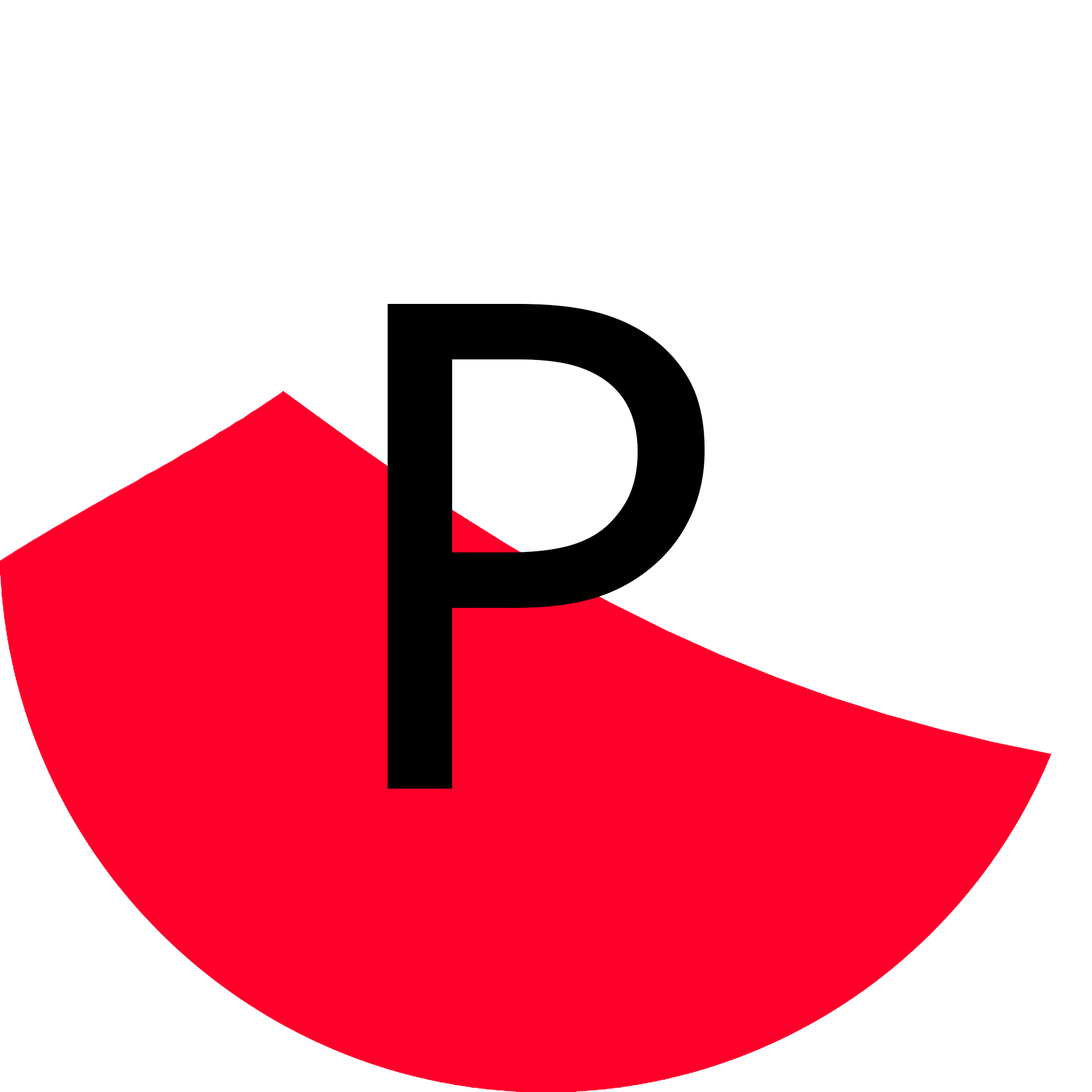
<style>
.page{position:relative;width:1092px;height:1092px;background:#ffffff}
.page>*{position:absolute;margin:0}
.t1{font:666.5px "MSReferenceSansSerif";color:#000000}
</style>
<div class="page">
<p class="t1" style="left:388px;top:304px;width:317px;height:485px">P</p>
</div>
